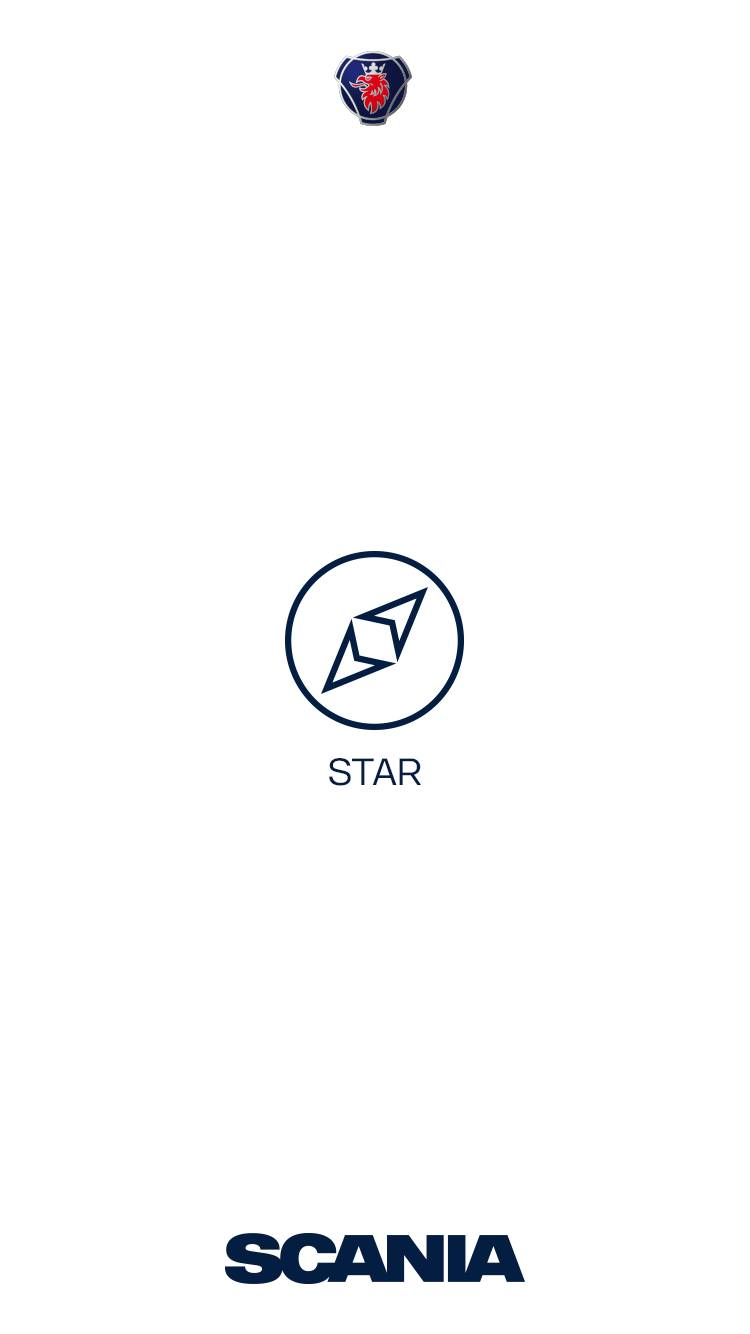
<style>
.page{position:relative;width:750px;height:1334px;background:#ffffff}
.page>*{position:absolute;margin:0}
.t1{font:37.5px "ScaniaSans-Regular";letter-spacing:-0.025em;color:#041e42}
</style>
<div class="page">
<p class="t1" style="left:329px;top:758px;width:92px;height:28px">STAR</p>
</div>
